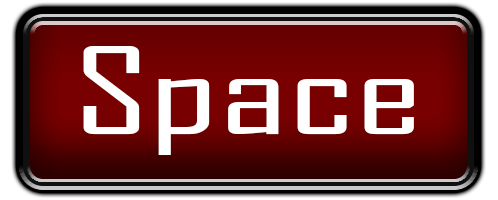
<style>
.page{position:relative;width:498px;height:200px}
.page>*{position:absolute;margin:0}
.t1{font:114.9px "AgencyFB-Reg";color:#ffffff;scale:1.6 1}
</style>
<div class="page">
<p class="t1" style="left:83px;top:46px;width:331px;height:109px">Space</p>
</div>
